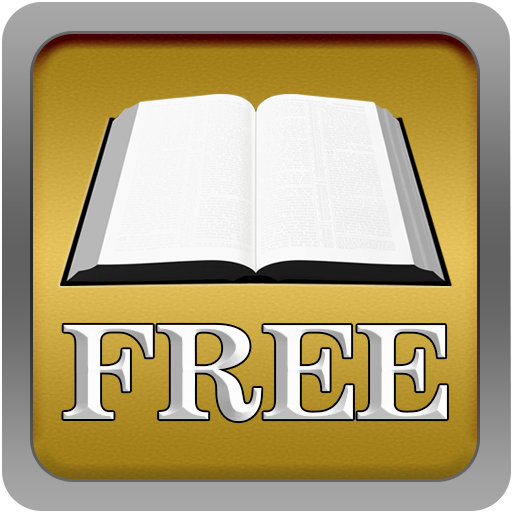
<style>
.page{position:relative;width:512px;height:512px}
.page>*{position:absolute;margin:0}
.t1{font:126.7px "Ion-Bold"}
</style>
<div class="page">
<p class="t1" style="left:63px;top:324px;width:384px;height:98px">FREE</p>
</div>
